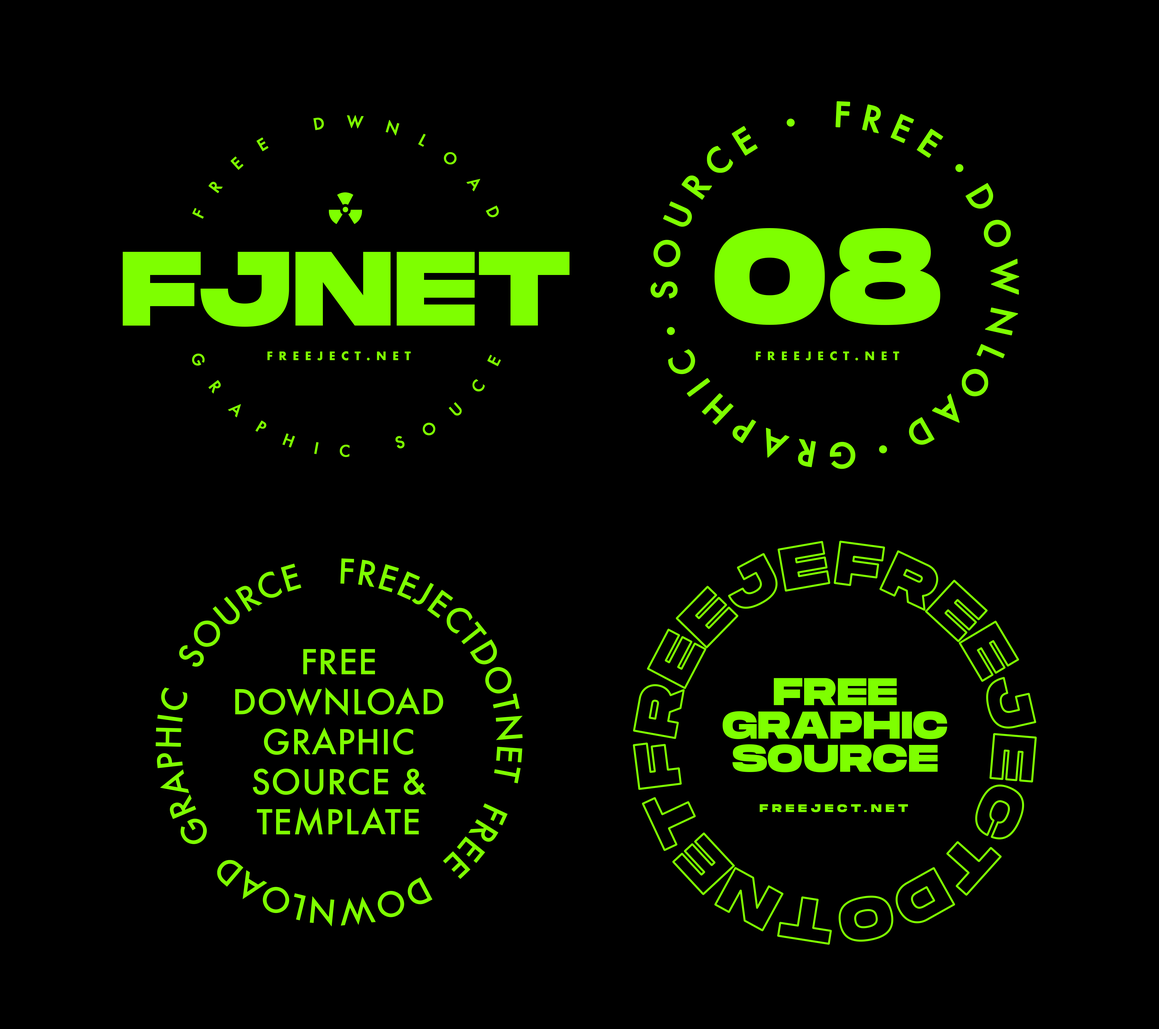
<style>
.page{position:relative;width:1159px;height:1029px;background:#000000}
.page>*{position:absolute;margin:0}
.t1{font:33.4px "Futura-Medium";letter-spacing:0.26em;color:#7eff00;font-weight:bold}
.t2{font:15.5px "Futura-Medium";letter-spacing:1.38em;color:#7eff00;font-weight:bold}
.t3{font:134.4px "MonumentExtended-Ultrabold";letter-spacing:0.02em;color:#7eff00}
.t4{font:105.3px "MonumentExtended-Ultrabold";letter-spacing:0.02em;color:#7eff00}
.t5{font:11.5px "Futura-Bold";letter-spacing:0.5em;color:#7eff00}
.t6{font:33.4px "Futura-Medium";letter-spacing:0.02em;color:#7eff00}
.t7{font:38.6px/33.4px "MonumentExtended-Ultrabold";letter-spacing:0.02em;color:#7eff00}
.t8{font:11.2px "MonumentExtended-Ultrabold";letter-spacing:0.36em;color:#7eff00}
</style>
<div class="page">
<p class="t1" style="left:650px;top:101px;width:369px;height:368px">FREE  DOWNLOAD  GRAPHIC  SOURCE</p>
<p class="t2" style="left:192px;top:115px;width:307px;height:104px">FREE DWNLOAD</p>
<p class="t3" style="left:714px;top:228px;width:226px;height:97px">08</p>
<p class="t4" style="left:123px;top:252px;width:446px;height:75px">FJNET</p>
<p class="t2" style="left:192px;top:354px;width:309px;height:103px">GRAPHIC SOUCE</p>
<p class="t5" style="left:267px;top:351px;width:144px;height:9px">FREEJECT.NET</p>
<p class="t5" style="left:756px;top:351px;width:143px;height:9px">FREEJECT.NET</p>
<p class="t6" style="left:156px;top:558px;width:367px;height:369px">FREEJECTDOTNET  FREE  DOWNLOAD  GRAPHIC  SOURCE</p>
<p class="t6" style="left:235px;top:649px;width:208px;height:187px;text-align:center">FREE<br>DOWNLOAD<br>GRAPHIC<br>SOURCE &amp;<br>TEMPLATE</p>
<p class="t7" style="left:722px;top:678px;width:225px;height:94px;text-align:center">FREE<br>GRAPHIC<br>SOURCE</p>
<p class="t8" style="left:759px;top:804px;width:149px;height:8px">FREEJECT.NET</p>
</div>
